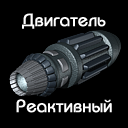
<style>
.page{position:relative;width:128px;height:128px;background:#000000}
.page>*{position:absolute;margin:0}
.t1{font:18px "BauhausC-Medium";color:#ffffff;font-weight:bold}
</style>
<div class="page">
<p class="t1" style="left:22px;top:13px;width:84px;height:16px">Двигатель</p>
<p class="t1" style="left:16px;top:99px;width:96px;height:14px">Реактивный</p>
</div>
